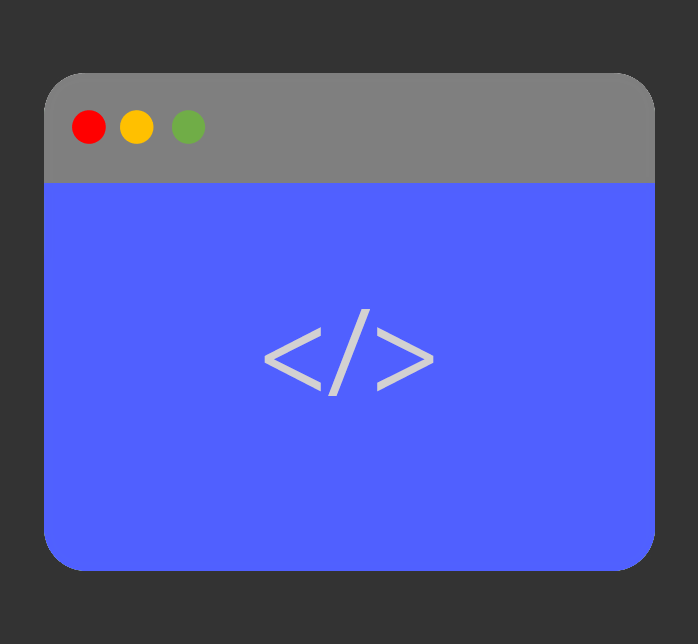
<style>
.page{position:relative;width:698px;height:644px;background:#5060ff}
.page>*{position:absolute;margin:0}
.t1{font:119.6px "MyriadPro-Regular";color:#d3d1d1}
</style>
<div class="page">
<p class="t1" style="left:264px;top:309px;width:170px;height:87px">&lt;/&gt;</p>
</div>
